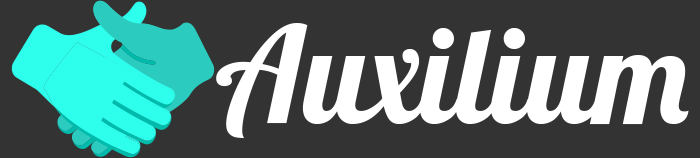
<style>
.page{position:relative;width:700px;height:158px;background:#333333}
.page>*{position:absolute;margin:0}
.t1{font:133.3px "Lobster-Regular";color:#ffffff}
</style>
<div class="page">
<p class="t1" style="left:216px;top:23px;width:473px;height:115px">Auxilium</p>
</div>
